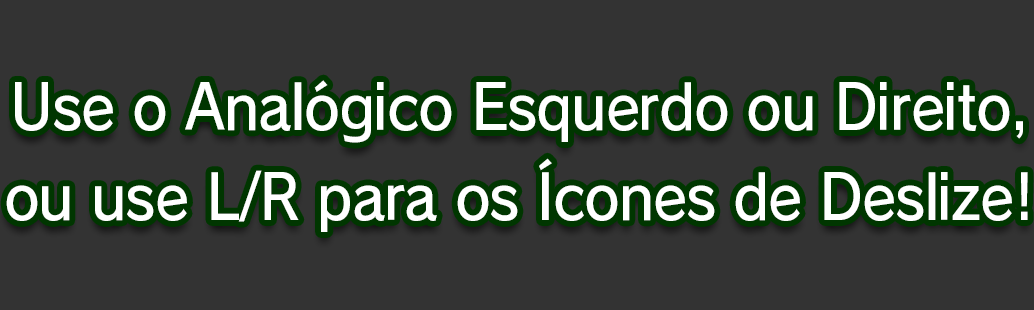
<style>
.page{position:relative;width:1034px;height:310px;background:#333333}
.page>*{position:absolute;margin:0}
.t1{font:61.3px/90.7px "RodinPro-DB";letter-spacing:-0.022em;color:#ffffff;scale:0.92 1}
</style>
<div class="page">
<p class="t1" style="left:6px;top:80px;width:1022px;height:152px;text-align:center">Use o Analógico Esquerdo ou Direito,<br>ou use L/R para os Ícones de Deslize!</p>
</div>
